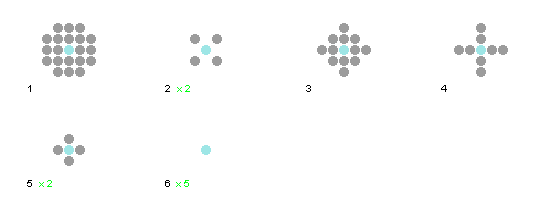
<style>
.page{position:relative;width:550px;height:200px;background:#ffffff}
.page>*{position:absolute;margin:0}
.t1{font:10px "ArialMT";color:#000000}
.t2{font:10px "ArialMT";color:#02fe14}
</style>
<div class="page">
<p class="t1" style="left:28px;top:85px;width:419px;height:7px">1                                            2                                             3                                           4</p>
<p class="t2" style="left:177px;top:85px;width:13px;height:7px">x 2</p>
<p class="t1" style="left:27px;top:180px;width:143px;height:7px">5                                            6</p>
<p class="t2" style="left:39px;top:180px;width:150px;height:7px">x 2                                         x 5</p>
</div>
